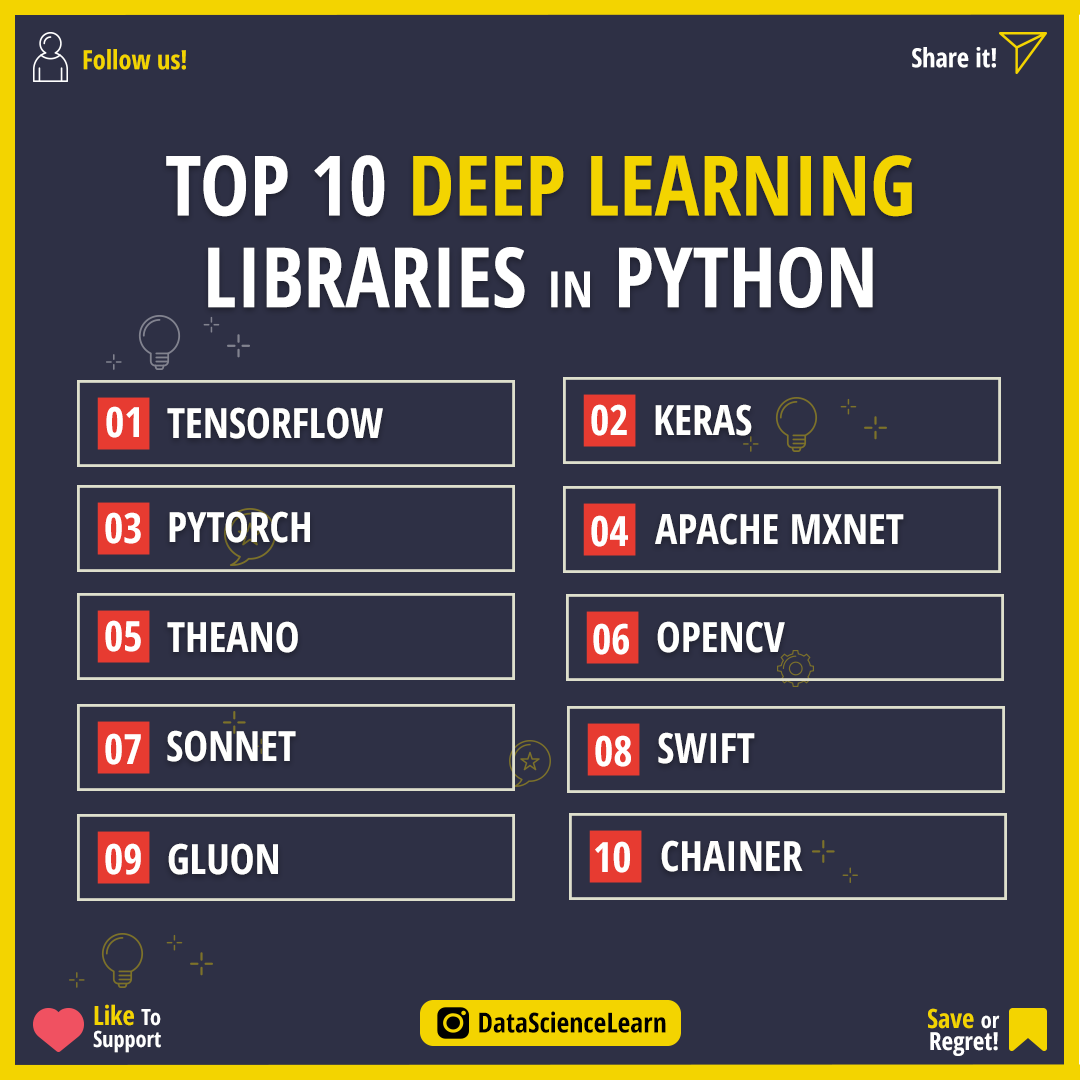
<style>
.page{position:relative;width:1080px;height:1080px;background:#2e3045}
.page>*{position:absolute;margin:0}
.t1{font:26.4px "OpenSans-CondensedBold";color:#f3d400}
.t2{font:26.4px "OpenSans-CondensedBold";color:#ffffff}
.t3{font:83.3px/91.7px "OpenSans-CondensedBold";color:#f3d400}
.t4{font:83.3px/91.7px "OpenSans-CondensedBold";color:#ffffff}
.t5{font:50px/91.7px "OpenSans-CondensedBold";color:#ffffff}
.t6{font:41.7px "OpenSans-CondensedBold";color:#fffffe}
.t7{font:22.2px/22.2px "OpenSans-CondensedBold";color:#ffffff}
.t8{font:26.4px/22.2px "OpenSans-CondensedBold";color:#f3d400}
.t9{font:27.8px "OpenSans-CondensedBold";color:#000000}
.t10{font:25px/22.2px "OpenSans-CondensedBold";color:#ffffff}
</style>
<div class="page">
<p class="t1" style="left:83px;top:49px;width:103px;height:21px">Follow us!</p>
<p class="t2" style="left:912px;top:47px;width:84px;height:21px">Share it!</p>
<p class="t3" style="left:166px;top:155px;width:746px;height:153px;text-align:center"><span class="t4">TOP 10 </span>DEEP LEARNING<br><span class="t4">LIBRARIES </span><span class="t5">IN</span><span class="t4"> PYTHON</span></p>
<p class="t6" style="left:106px;top:406px;width:33px;height:32px">01</p>
<p class="t6" style="left:167px;top:407px;width:216px;height:32px">TENSORFLOW</p>
<p class="t6" style="left:591px;top:404px;width:36px;height:32px">02</p>
<p class="t6" style="left:655px;top:404px;width:97px;height:32px">KERAS</p>
<p class="t6" style="left:105px;top:512px;width:36px;height:32px">03</p>
<p class="t6" style="left:169px;top:511px;width:141px;height:32px">PYTORCH</p>
<p class="t6" style="left:591px;top:515px;width:37px;height:32px">04</p>
<p class="t6" style="left:655px;top:513px;width:249px;height:32px">APACHE MXNET</p>
<p class="t6" style="left:105px;top:620px;width:36px;height:32px">05</p>
<p class="t6" style="left:167px;top:621px;width:131px;height:32px">THEANO</p>
<p class="t6" style="left:593px;top:623px;width:36px;height:32px">06</p>
<p class="t6" style="left:657px;top:621px;width:128px;height:32px">OPENCV</p>
<p class="t6" style="left:105px;top:733px;width:36px;height:32px">07</p>
<p class="t6" style="left:167px;top:730px;width:129px;height:32px">SONNET</p>
<p class="t6" style="left:595px;top:735px;width:36px;height:32px">08</p>
<p class="t6" style="left:658px;top:732px;width:97px;height:32px">SWIFT</p>
<p class="t6" style="left:105px;top:843px;width:36px;height:32px">09</p>
<p class="t6" style="left:168px;top:843px;width:110px;height:32px">GLUON</p>
<p class="t6" style="left:595px;top:841px;width:35px;height:32px">10</p>
<p class="t6" style="left:661px;top:840px;width:142px;height:32px">CHAINER</p>
<p class="t7" style="left:93px;top:1004px;width:68px;height:49px"><span class="t8">Like </span>To<br>Support</p>
<p class="t9" style="left:479px;top:1011px;width:187px;height:22px">DataScienceLearn</p>
<p class="t10" style="left:928px;top:1008px;width:72px;height:48px;text-align:right"><span class="t8">Save </span><span class="t7">or<br></span>Regret!</p>
</div>
